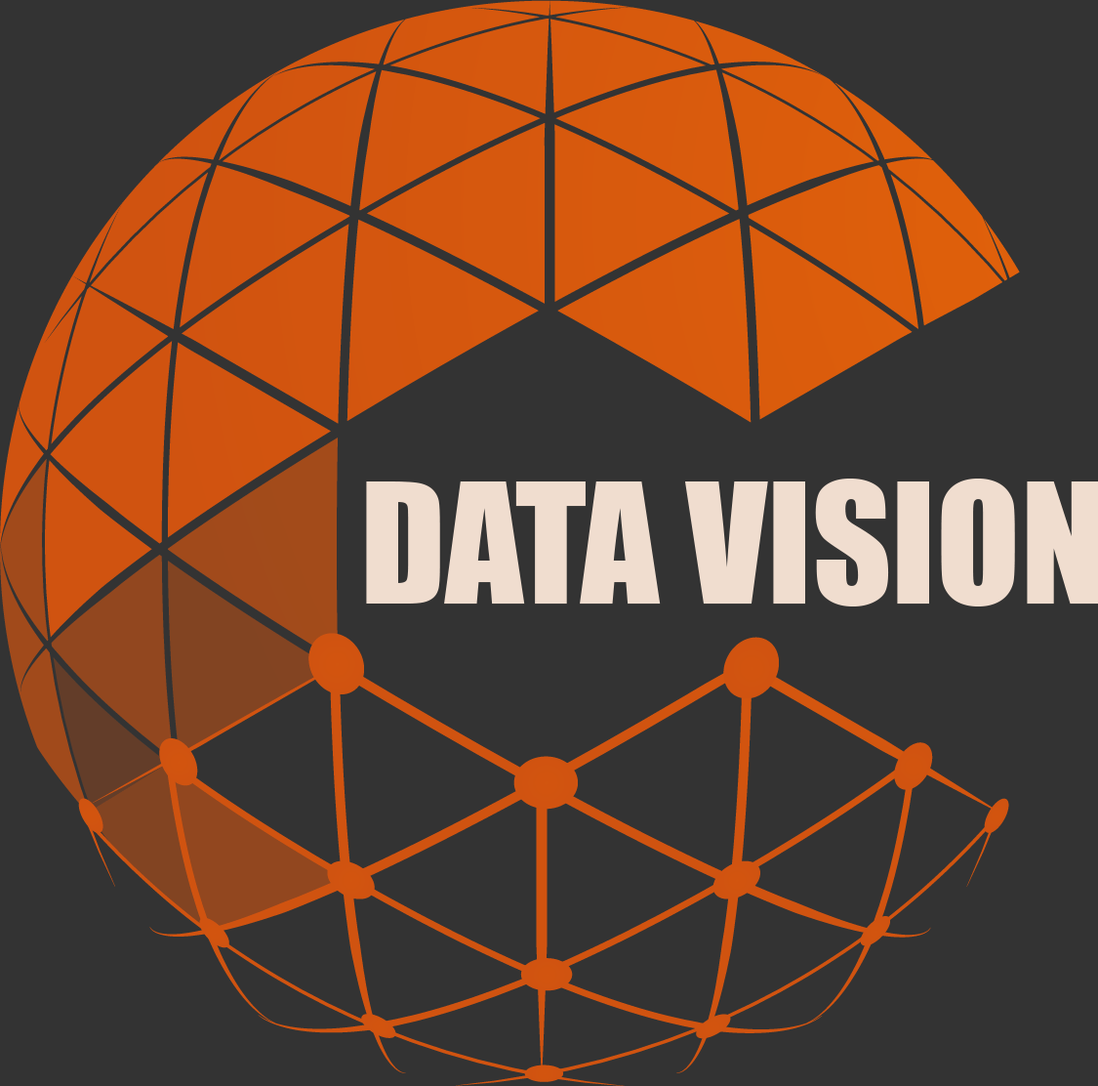
<style>
.page{position:relative;width:1098px;height:1086px;background:#333333}
.page>*{position:absolute;margin:0}
.t1{font:154.6px "Impact";color:#f0ddcf}
</style>
<div class="page">
<p class="t1" style="left:366px;top:478px;width:732px;height:128px">DATA VISION</p>
</div>
